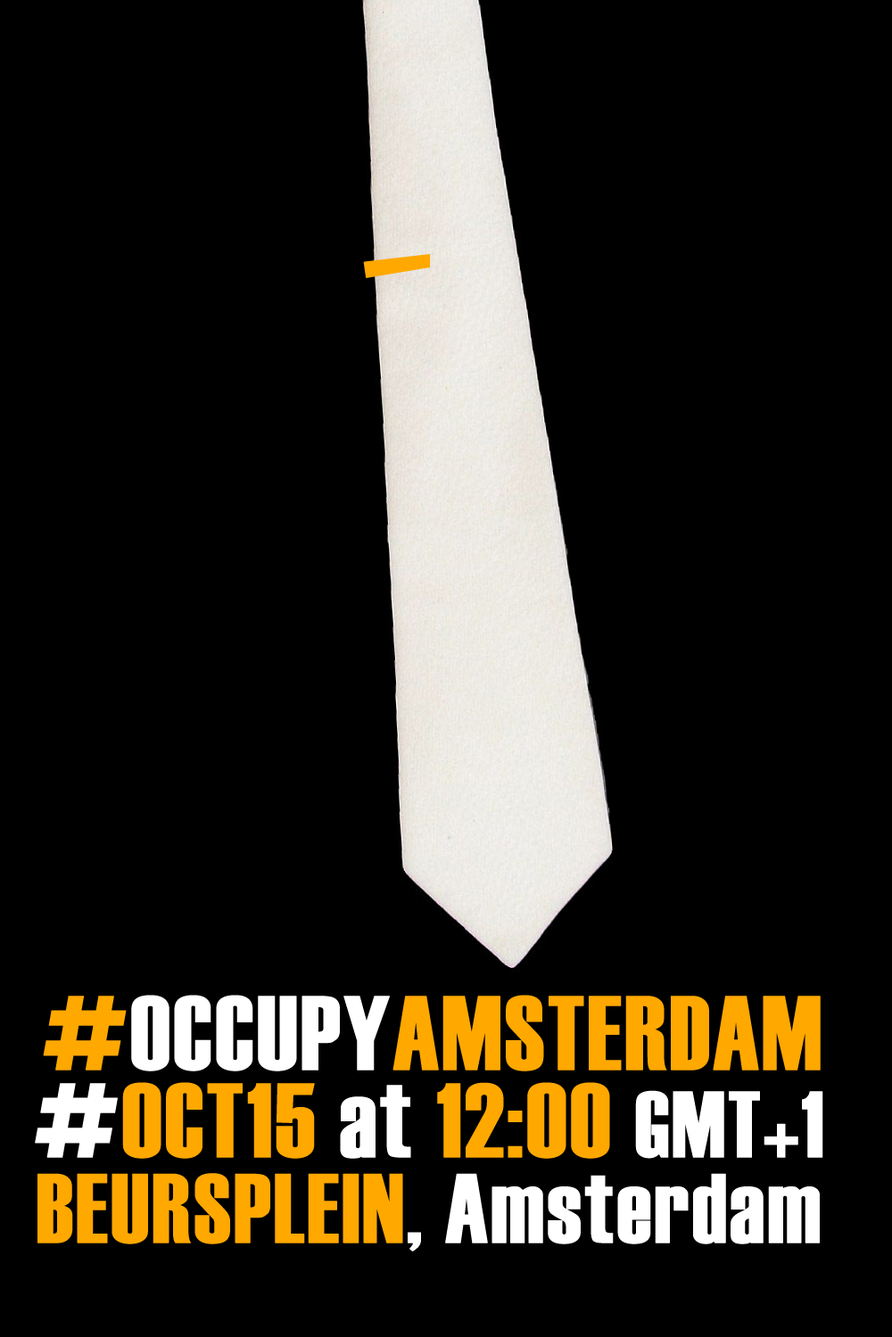
<style>
.page{position:relative;width:892px;height:1337px;background:#000000}
.page>*{position:absolute;margin:0}
.t1{font:105.2px "Haettenschweiler";color:#ffa800;font-weight:bold}
.t2{font:105.2px "Haettenschweiler";color:#ffffff;font-weight:bold}
.t3{font:93.6px "Haettenschweiler";color:#ffffff;font-weight:bold}
.t4{font:98.1px "Haettenschweiler";color:#ffffff;font-weight:bold}
.t5{font:98.1px "Haettenschweiler";color:#ffa800;font-weight:bold}
</style>
<div class="page">
<p class="t1" style="left:43px;top:995px;width:777px;height:77px">#<span class="t2">OCCUPY</span>AMSTERDAM</p>
<p class="t1" style="left:35px;top:1082px;width:788px;height:77px"><span class="t2">#</span>OCT15 <span class="t2">at </span>12:00 <span class="t3">GMT+1</span></p>
<p class="t4" style="left:37px;top:1173px;width:782px;height:79px"><span class="t5">BEURSPLEIN</span>, Amsterdam</p>
</div>
